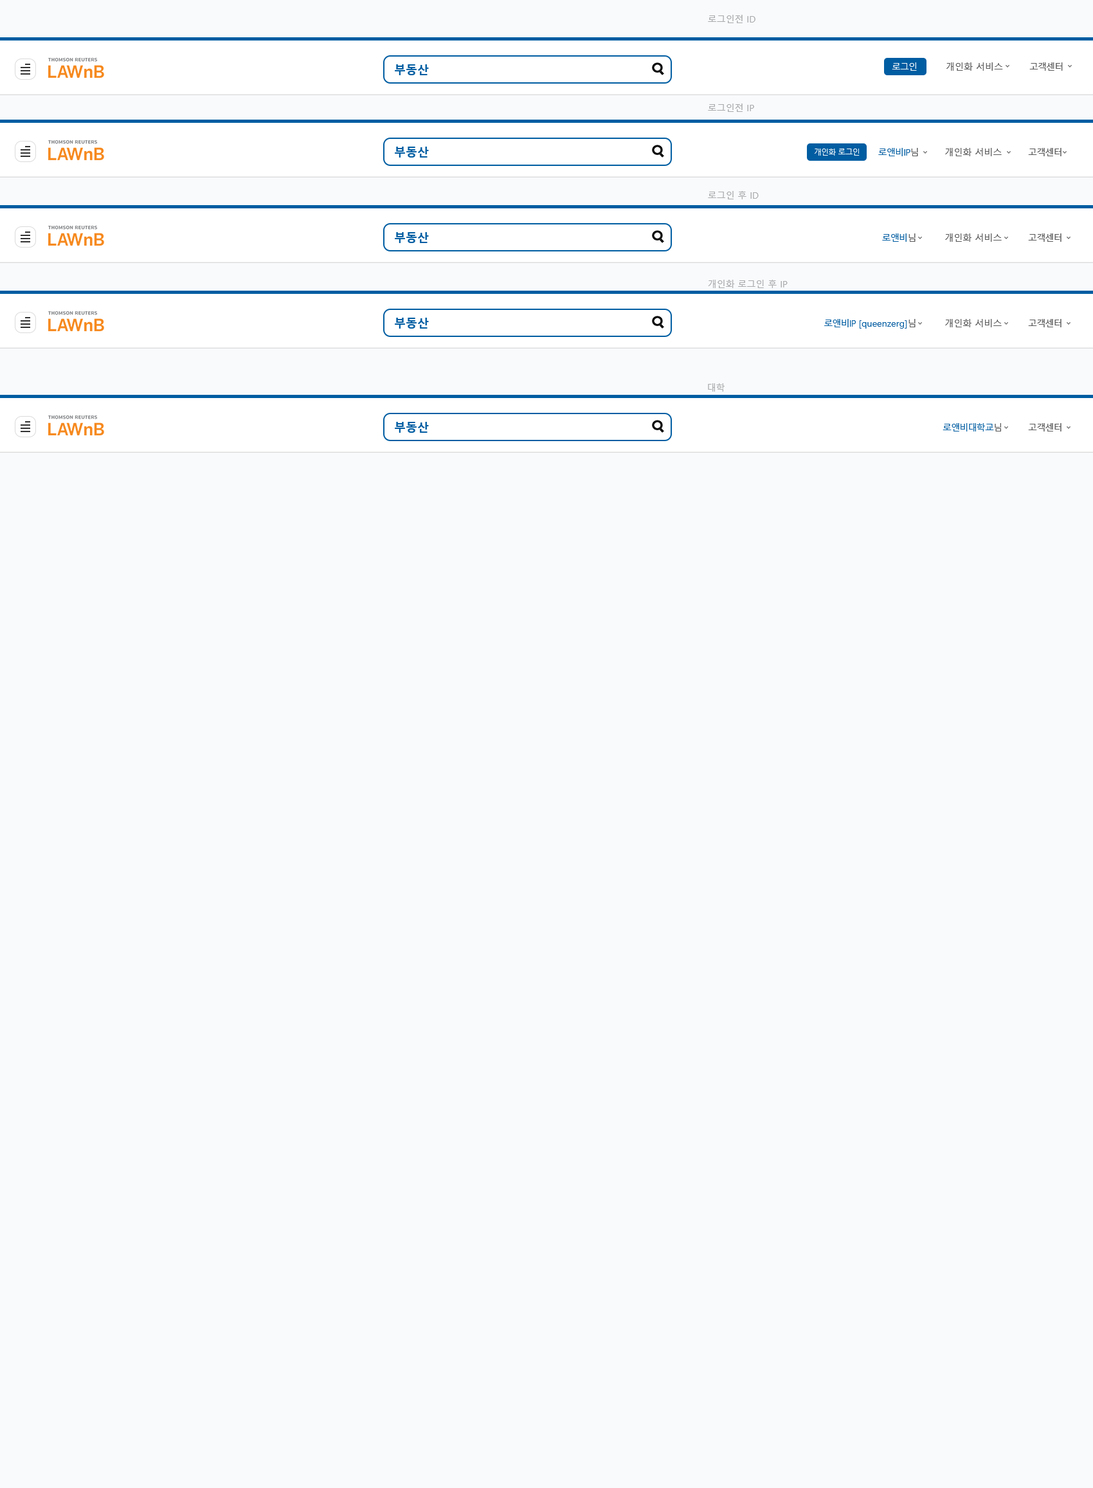
<style>
.page{position:relative;width:1093px;height:1488px;background:#f8fafc}
.page>*{position:absolute;margin:0}
.t1{font:9px "MalgunGothic";color:#a8a9aa}
.t2{font:9px "MalgunGothic";letter-spacing:-0.06em;color:#ffffff}
.t3{font:9px "MalgunGothic";color:#585858}
.t4{font:9px "MalgunGothic";letter-spacing:-0.06em;color:#585858}
.t5{font:7.7px "MalgunGothic";letter-spacing:-0.06em;color:#ffffff}
.t6{font:9px "MalgunGothic";letter-spacing:-0.06em;color:#005da2}
.t7{font:9px "MalgunGothic";color:#005da2}
</style>
<div class="page">
<p class="t1" style="left:708px;top:15px;width:47px;height:8px">로그인전 ID</p>
<p class="t2" style="left:892px;top:62px;width:25px;height:9px">로그인</p>
<p class="t3" style="left:946px;top:62px;width:117px;height:9px"><span class="t4"> </span>개인화 서비스<span class="t4">          고객센터</span></p>
<p class="t1" style="left:708px;top:104px;width:46px;height:8px">로그인전 IP</p>
<p class="t5" style="left:815px;top:148px;width:45px;height:8px">개인화 로그인</p>
<p class="t3" style="left:878px;top:148px;width:183px;height:8px"><span class="t6">로앤비IP</span><span class="t4">님          </span>개인화 서비스<span class="t4">          고객센터</span></p>
<p class="t1" style="left:708px;top:191px;width:51px;height:8px">로그인 후 ID</p>
<p class="t3" style="left:882px;top:233px;width:179px;height:9px"><span class="t6">로앤비</span><span class="t4">님           </span>개인화 서비스<span class="t4">          고객센터</span></p>
<p class="t1" style="left:708px;top:280px;width:80px;height:8px">개인화 로그인 후 IP</p>
<p class="t7" style="left:824px;top:319px;width:237px;height:9px"><span class="t6">로앤비IP</span> [queenzerg]<span class="t4">님           </span><span class="t3">개인화 서비스</span><span class="t4">          고객센터</span></p>
<p class="t1" style="left:708px;top:383px;width:16px;height:9px">대학</p>
<p class="t4" style="left:942px;top:423px;width:119px;height:8px"><span class="t6">로앤비대학교</span>님          고객센터</p>
</div>
